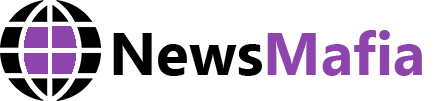
<style>
.page{position:relative;width:435px;height:101px;background:#ffffff}
.page>*{position:absolute;margin:0}
.t1{font:60px "Ebrima-Bold";color:#8e44ad}
.t2{font:60px "Ebrima-Bold";color:#000000}
</style>
<div class="page">
<p class="t1" style="left:113px;top:30px;width:309px;height:46px"><span class="t2">News</span>Mafia</p>
</div>
